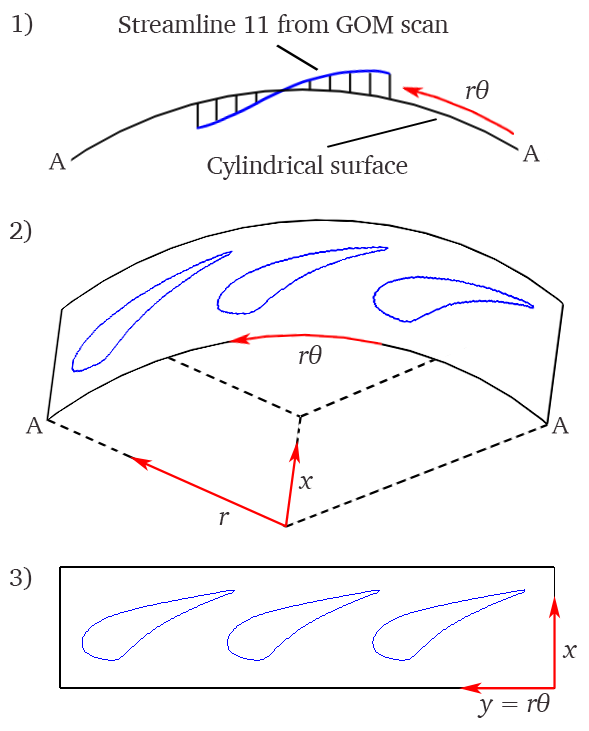
<style>
.page{position:relative;width:589px;height:731px;background:#ffffff}
.page>*{position:absolute;margin:0}
.t1{font:26px "Charter-Roman";letter-spacing:-0.02em;color:#352e31}
.t2{font:26px "Charter-Italic";letter-spacing:-0.02em;color:#352e31}
</style>
<div class="page">
<p class="t1" style="left:12px;top:13px;width:21px;height:23px">1)</p>
<p class="t1" style="left:118px;top:14px;width:331px;height:20px">Streamline 11 from GOM scan</p>
<p class="t2" style="left:466px;top:80px;width:23px;height:19px">rθ</p>
<p class="t1" style="left:522px;top:145px;width:18px;height:17px">A</p>
<p class="t1" style="left:48px;top:153px;width:18px;height:17px">A</p>
<p class="t1" style="left:207px;top:155px;width:201px;height:25px">Cylindrical surface</p>
<p class="t1" style="left:10px;top:220px;width:22px;height:23px">2)</p>
<p class="t2" style="left:299px;top:345px;width:23px;height:19px">rθ</p>
<p class="t1" style="left:25px;top:417px;width:18px;height:17px">A</p>
<p class="t1" style="left:551px;top:417px;width:18px;height:17px">A</p>
<p class="t2" style="left:298px;top:476px;width:15px;height:13px">x</p>
<p class="t2" style="left:219px;top:512px;width:11px;height:13px">r</p>
<p class="t1" style="left:10px;top:567px;width:22px;height:23px">3)</p>
<p class="t2" style="left:562px;top:645px;width:15px;height:13px">x</p>
<p class="t2" style="left:477px;top:693px;width:73px;height:25px">y = rθ</p>
</div>
